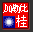
<style>
.page{position:relative;width:33px;height:32px;background:#f20000}
.page>*{position:absolute;margin:0}
.t1{font:10.4px "SimSun";letter-spacing:-0.25em;color:#ffffff}
.t2{font:11.7px "SimSun";color:#ffffff}
</style>
<div class="page">
<p class="t1" style="left:3px;top:4px;width:25px;height:9px">加勒比</p>
<p class="t2" style="left:16px;top:15px;width:11px;height:12px">桂</p>
</div>
